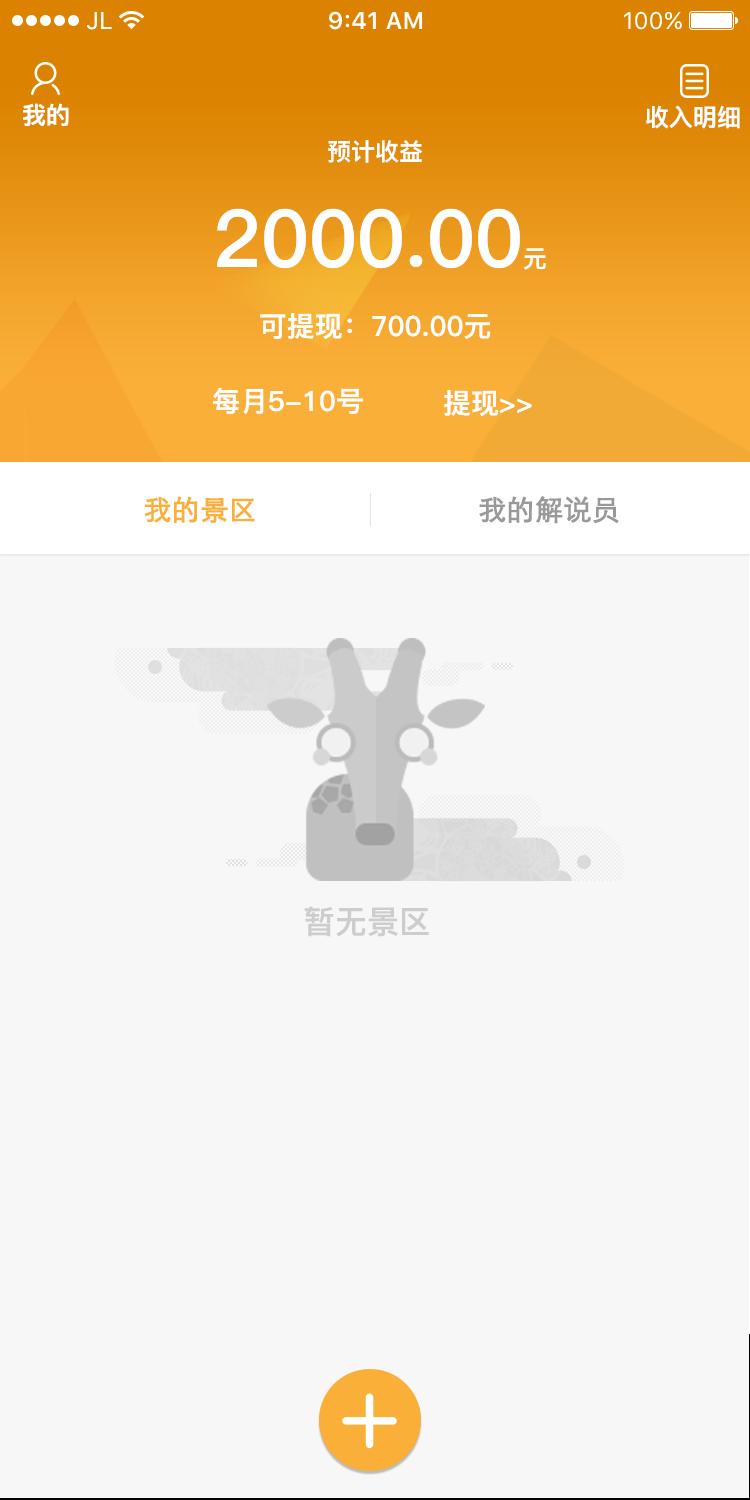
<style>
.page{position:relative;width:750px;height:1500px;background:#f7f7f7}
.page>*{position:absolute;margin:0}
.t1{font:24px "PingFang-SC-Heavy";color:#ffffff}
.t2{font:80px "PingFang-SC-Heavy";color:#ffffff}
.t3{font:28px "PingFang-SC-Heavy";color:#ffffff}
.t4{font:28px "STXihei";letter-spacing:-0.02em;color:#faaf39;font-weight:bold}
.t5{font:28px "STXihei";letter-spacing:-0.02em;color:#999999;font-weight:bold}
.t6{font:31.9px "PingFang-SC-Heavy";color:#cdcdcd}
</style>
<div class="page">
<p class="t1" style="left:23px;top:103px;width:46px;height:23px">我的</p>
<p class="t1" style="left:646px;top:105px;width:94px;height:24px">收入明细</p>
<p class="t1" style="left:328px;top:140px;width:94px;height:23px">预计收益</p>
<p class="t2" style="left:217px;top:208px;width:329px;height:62px">2000.00<span class="t1">元</span></p>
<p class="t3" style="left:260px;top:313px;width:231px;height:26px">可提现：700.00元</p>
<p class="t3" style="left:213px;top:387px;width:150px;height:27px">每月5-10号</p>
<p class="t3" style="left:444px;top:390px;width:88px;height:26px">提现&gt;&gt;</p>
<p class="t4" style="left:144px;top:496px;width:111px;height:27px">我的景区</p>
<p class="t5" style="left:479px;top:496px;width:140px;height:28px">我的解说员</p>
<p class="t6" style="left:304px;top:906px;width:125px;height:31px">暂无景区</p>
</div>
